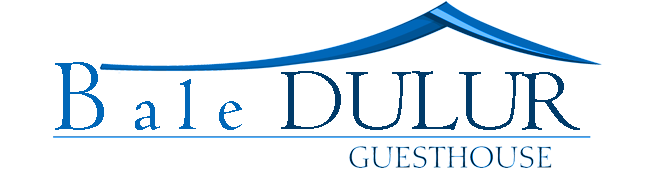
<style>
.page{position:relative;width:652px;height:170px;background:#ffffff}
.page>*{position:absolute;margin:0}
.t1{font:75px "Centaur";color:#0067b8}
.t2{font:105px "Centaur";color:#0067b8}
.t3{font:90px "Centaur";color:#003b6a}
</style>
<div class="page">
<p class="t1" style="left:55px;top:62px;width:525px;height:68px"><span class="t2">B </span>a l e  <span class="t3">DULUR</span></p>
</div>
